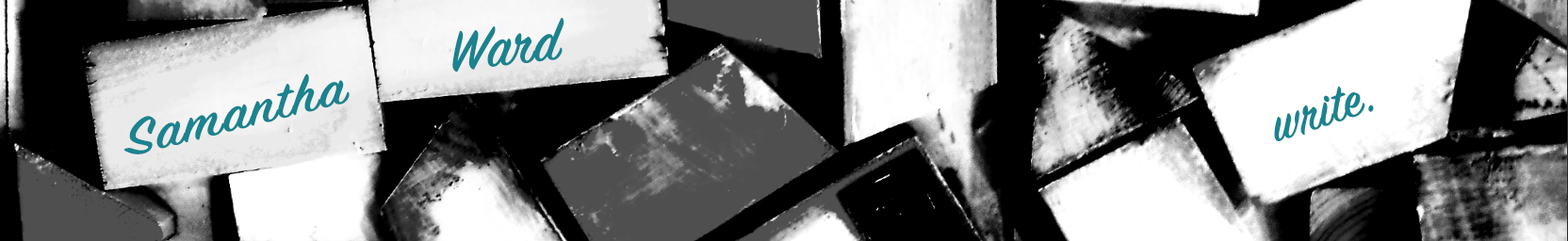
<style>
.page{position:relative;width:1568px;height:241px;background:#000000}
.page>*{position:absolute;margin:0}
.t1{font:62.7px "SignPainter-HouseScript";color:#1a838f;font-weight:bold}
.t2{font:54.6px "SignPainter-HouseScript";color:#1a838f;font-weight:bold;scale:1.23 1}
.t3{font:56.5px "SignPainter-HouseScript";color:#1a838f;font-weight:bold}
</style>
<div class="page">
<p class="t1" style="left:452px;top:18px;width:112px;height:55px;rotate:-7deg">Ward</p>
<p class="t2" style="left:123px;top:74px;width:227px;height:81px;rotate:-14deg">Samantha</p>
<p class="t3" style="left:1274px;top:86px;width:100px;height:55px;rotate:-18deg">write.</p>
</div>
